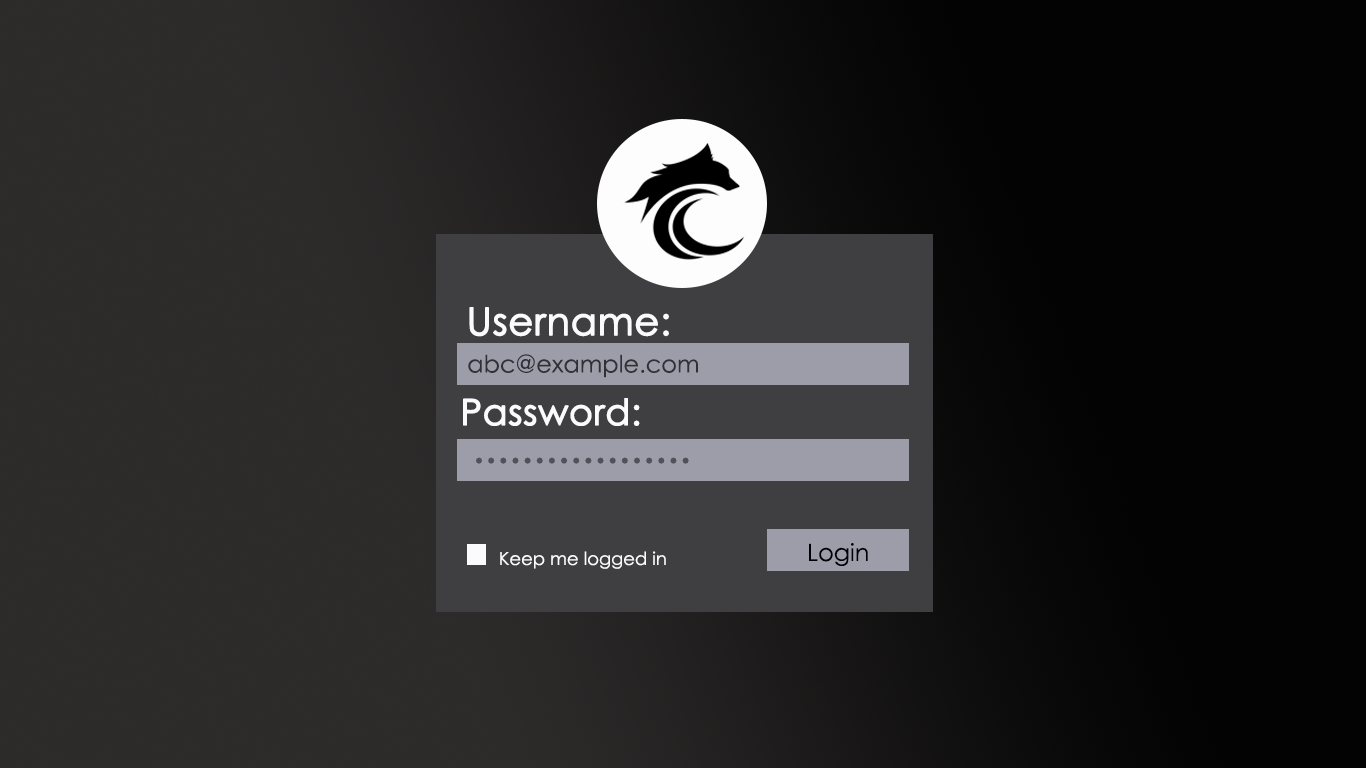
<style>
.page{position:relative;width:1366px;height:768px}
.page>*{position:absolute;margin:0}
.t1{font:38px "CenturyGothic";color:#fbfbfd;font-weight:bold}
.t2{font:24px "CenturyGothic";color:#303135}
.t3{font:36px "CenturyGothic";color:#fbfbfd;font-weight:bold}
.t4{font:40px "CenturyGothic";color:#505159;font-weight:bold}
.t5{font:24px "CenturyGothic";color:#000004}
.t6{font:18px "CenturyGothic";color:#fbfbfd}
</style>
<div class="page">
<p class="t1" style="left:469px;top:307px;width:200px;height:30px">Username:</p>
<p class="t2" style="left:468px;top:354px;width:230px;height:24px">abc@example.com</p>
<p class="t3" style="left:463px;top:398px;width:177px;height:28px">Password:</p>
<p class="t4" style="left:476px;top:457px;width:213px;height:7px">..................</p>
<p class="t5" style="left:809px;top:543px;width:59px;height:23px">Login</p>
<p class="t6" style="left:500px;top:551px;width:166px;height:18px">Keep me logged in</p>
</div>
